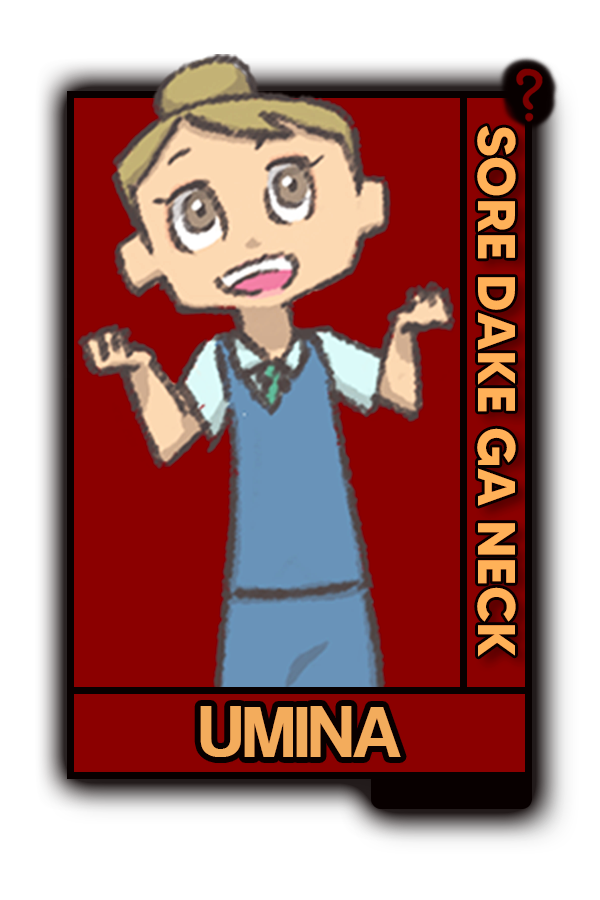
<style>
.page{position:relative;width:600px;height:900px;background:#8b0000}
.page>*{position:absolute;margin:0}
.t1{font:52.7px "MADETOMMY-Bold";color:#ffb158}
.t2{font:75px "CoolveticaRg-Regular";color:#f3ac5c}
</style>
<div class="page">
<p class="t1" style="left:477px;top:126px;width:39px;height:531px;rotate:90deg">SORE DAKE GA NECK</p>
<p class="t2" style="left:200px;top:706px;width:201px;height:51px">UMINA</p>
</div>
